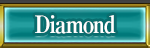
<style>
.page{position:relative;width:150px;height:48px}
.page>*{position:absolute;margin:0}
.t1{font:24px "RyuminPro-ExBold";letter-spacing:-0.08em;color:#ffffff;scale:0.9 1}
</style>
<div class="page">
<p class="t1" style="left:35px;top:15px;width:81px;height:19px">Diamond</p>
</div>
